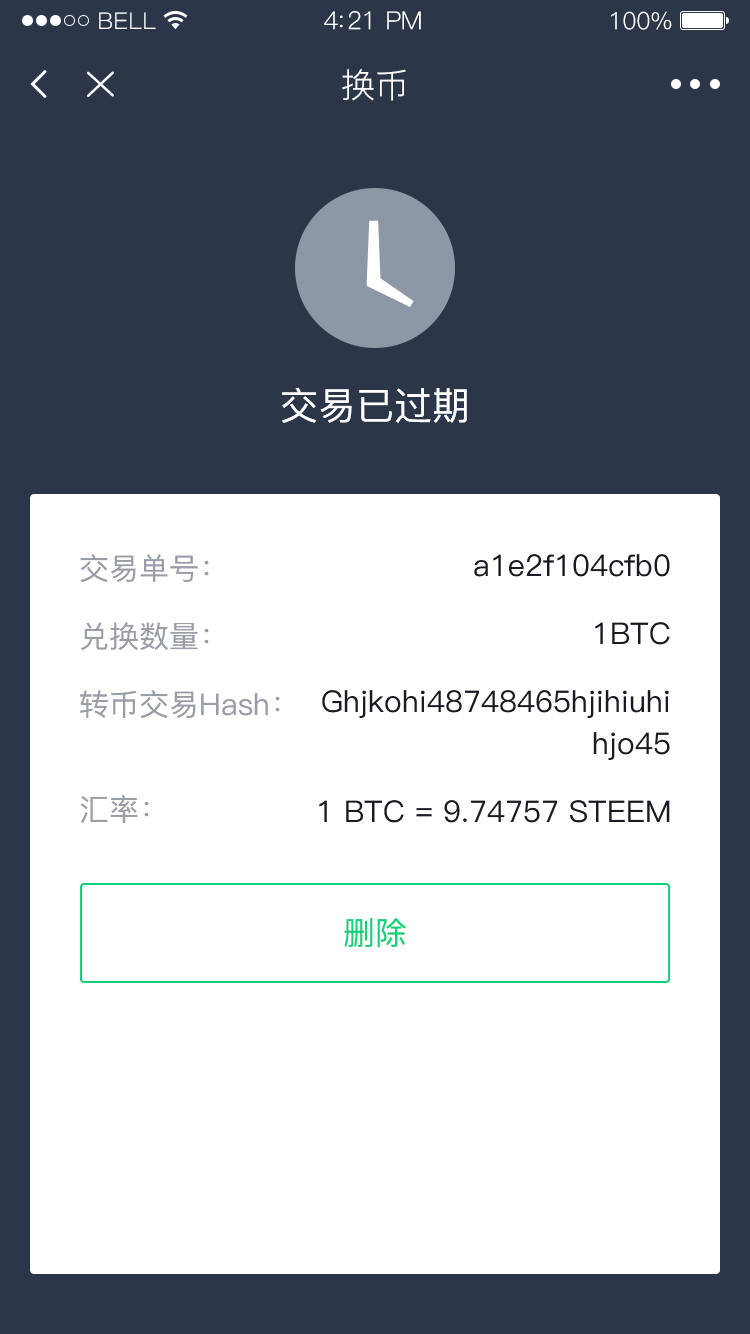
<style>
.page{position:relative;width:750px;height:1334px;background:#ffffff}
.page>*{position:absolute;margin:0}
.t1{font:23px "PingFang-SC-Regular";letter-spacing:0.02em;color:#ffffff}
.t2{font:25px "PingFang-SC-Regular";letter-spacing:-0.02em;color:#ffffff}
.t3{font:24px "PingFang-SC-Regular";letter-spacing:-0.02em;color:#ffffff}
.t4{font:34px "PingFang-SC-Regular";color:#ffffff}
.t5{font:38px "PingFang-SC-Medium";color:#ffffff}
.t6{font:30px/68px "PingFang-SC-Medium";color:#999da7}
.t7{font:30px/105px "PingFang-SC-Medium";color:#999da7}
.t8{font:30px/48px "PingFang-SC-Medium";color:#181b23}
.t9{font:30px/68px "PingFang-SC-Medium";color:#181b23}
.t10{font:30px/42px "PingFang-SC-Medium";color:#181b23}
.t11{font:32px "PingFang-SC-Medium";color:#10d078}
</style>
<div class="page">
<p class="t1" style="left:99px;top:12px;width:57px;height:17px">BELL</p>
<p class="t2" style="left:324px;top:11px;width:97px;height:19px">4:21 PM</p>
<p class="t3" style="left:611px;top:11px;width:61px;height:19px">100%</p>
<p class="t4" style="left:342px;top:69px;width:64px;height:32px">换币</p>
<p class="t5" style="left:282px;top:387px;width:185px;height:36px">交易已过期</p>
<p class="t6" style="left:80px;top:554px;width:200px;height:270px">交易单号：                        <br>兑换数量：<br>转币交易Hash：<br><span class="t7">汇</span>率：</p>
<p class="t8" style="left:319px;top:554px;width:351px;height:269px;text-align:right"><span class="t6"> </span><span class="t9">a1e2f104cfb0<br>1BTC<br>G</span>hjkohi48748465hjihiuh<span class="t10">i<br>hjo45<br></span><span class="t9">1 BTC = 9.74757 STEEM</span></p>
<p class="t11" style="left:344px;top:918px;width:62px;height:30px">删除</p>
</div>
